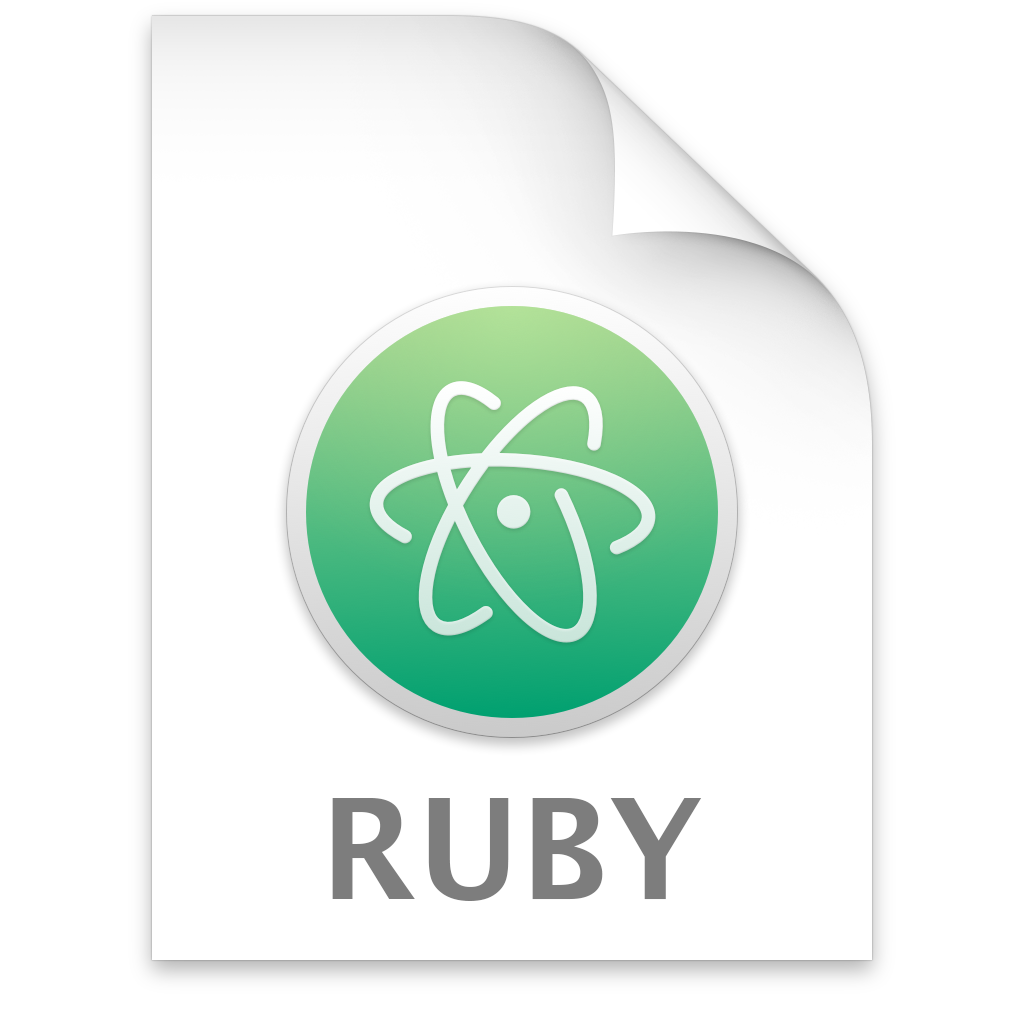
<style>
.page{position:relative;width:1024px;height:1024px;background:#ffffff}
.page>*{position:absolute;margin:0}
.t1{font:140px "LucidaGrande-Bold";color:#7d7d7d}
</style>
<div class="page">
<p class="t1" style="left:332px;top:798px;width:370px;height:103px">RUBY</p>
</div>
